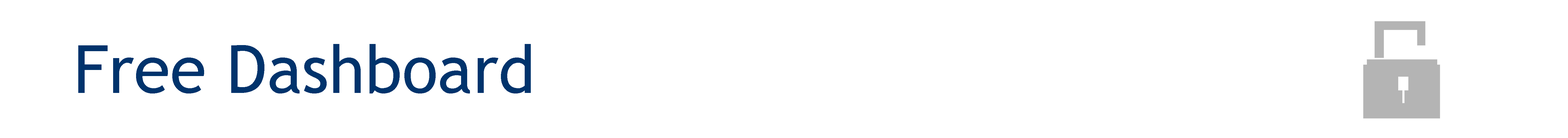
<style>
.page{position:relative;width:1568px;height:138px;background:#ffffff}
.page>*{position:absolute;margin:0}
.t1{font:66.4px "TrebuchetMS";color:#00336c}
</style>
<div class="page">
<p class="t1" style="left:78px;top:44px;width:453px;height:49px">Free Dashboard</p>
</div>
